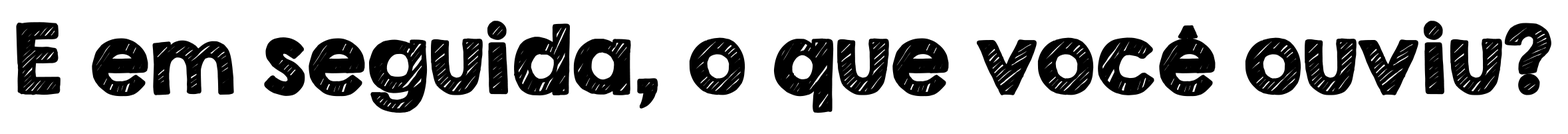
<style>
.page{position:relative;width:1568px;height:134px;background:#ffffff}
.page>*{position:absolute;margin:0}
.t1{font:83.1px "KGSecondChancesSketch";color:#000000;font-weight:bold}
</style>
<div class="page">
<p class="t1" style="left:16px;top:21px;width:1535px;height:92px">E em seguida, o que você ouviu?</p>
</div>
